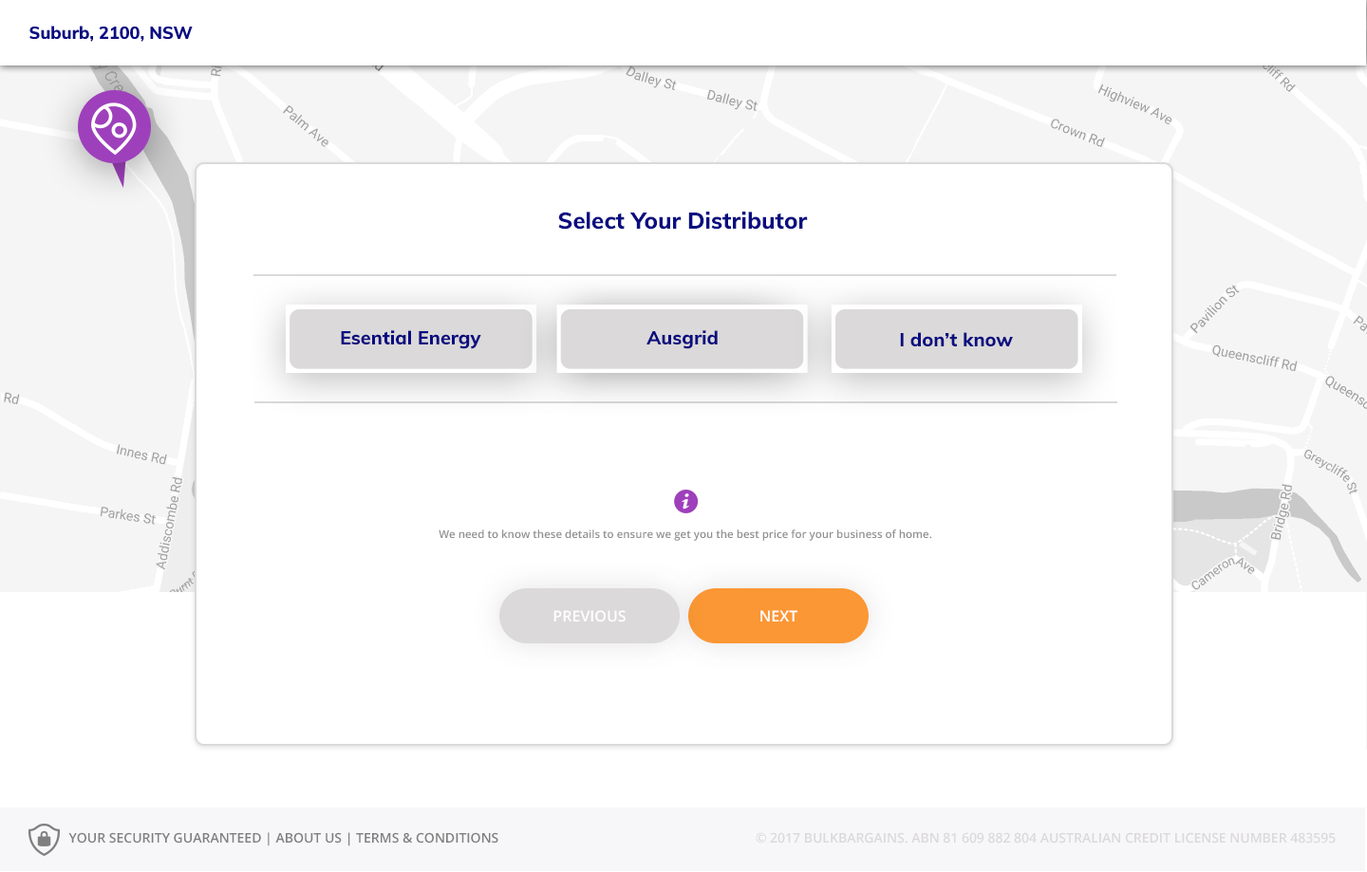
<style>
.page{position:relative;width:1367px;height:872px;background:#ffffff}
.page>*{position:absolute;margin:0}
.t1{font:17.1px "Muli-ExtraBold";color:#0a0d80}
.t2{font:22.8px "Muli-ExtraBold";color:#0a0d80}
.t3{font:18.9px "Muli-ExtraBold";color:#0a0d80}
.t4{font:10.9px "OpenSans-Semibold";color:#918f8f}
.t5{font:15.2px "OpenSans-Semibold";color:#ffffff;text-transform:uppercase}
.t6{font:13.3px "OpenSans-Semibold";color:#807f7f;text-transform:uppercase}
.t7{font:13.3px "OpenSans-Semibold";color:#dbd9d9;text-transform:uppercase}
</style>
<div class="page">
<p class="t1" style="left:29px;top:26px;width:164px;height:16px">Suburb, 2100, NSW</p>
<p class="t2" style="left:558px;top:212px;width:250px;height:18px">Select Your Distributor</p>
<p class="t3" style="left:341px;top:330px;width:140px;height:19px">Esential Energy</p>
<p class="t3" style="left:646px;top:330px;width:72px;height:19px">Ausgrid</p>
<p class="t3" style="left:900px;top:332px;width:113px;height:15px">I don’t know</p>
<p class="t4" style="left:439px;top:530px;width:493px;height:11px">We need to know these details to ensure we get you the best price for your business of home.</p>
<p class="t5" style="left:553px;top:610px;width:73px;height:13px">Previous</p>
<p class="t5" style="left:760px;top:610px;width:37px;height:12px">NEXT</p>
<p class="t6" style="left:68px;top:832px;width:430px;height:15px">Your security guaranteed | about us | Terms &amp; Conditions</p>
<p class="t7" style="left:756px;top:832px;width:580px;height:12px">© 2017 Bulkbargains. ABN 81 609 882 804 Australian Credit License Number 483595</p>
</div>
